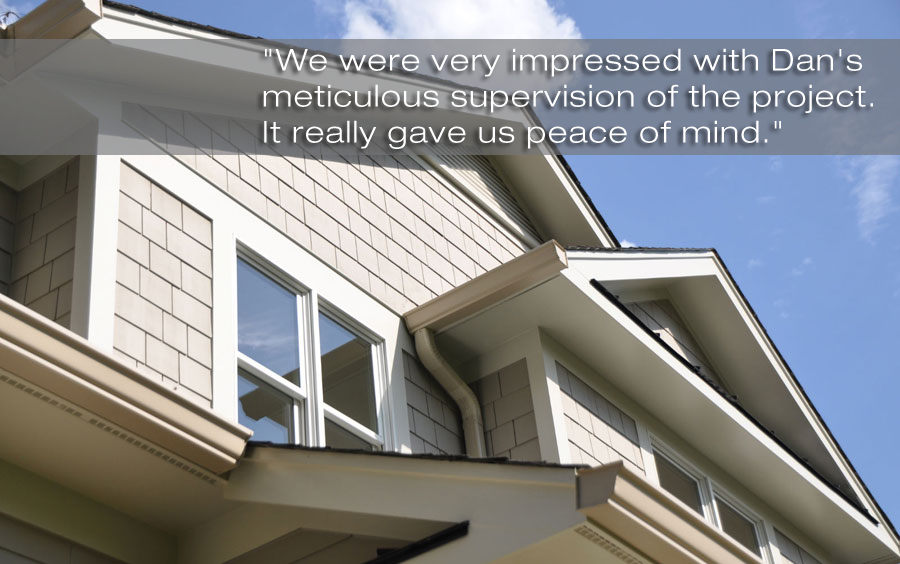
<style>
.page{position:relative;width:900px;height:564px}
.page>*{position:absolute;margin:0}
.t1{font:30px "HelveticaNeueLTStd-LtEx";letter-spacing:0.05em;color:#ffffff}
</style>
<div class="page">
<p class="t1" style="left:263px;top:48px;width:610px;height:101px">"We were very impressed with Dan's meticulous supervision of the project. It really gave us peace of mind."</p>
</div>
